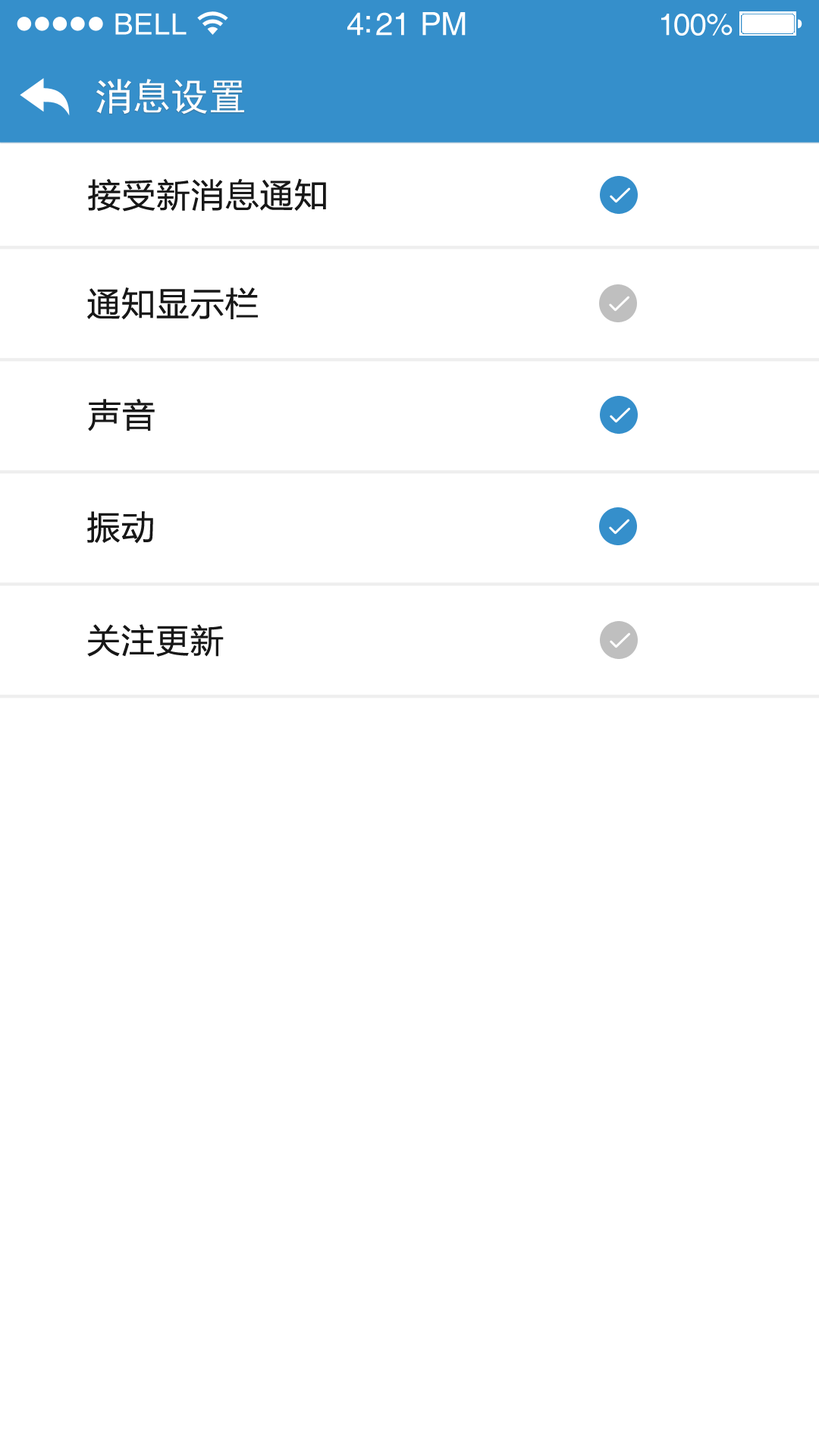
<style>
.page{position:relative;width:819px;height:1456px;background:#ffffff}
.page>*{position:absolute;margin:0}
.t1{font:29.3px "Helvetica";letter-spacing:0.02em;color:#ffffff}
.t2{font:31.8px "Helvetica";letter-spacing:-0.02em;color:#ffffff}
.t3{font:30.6px "Helvetica";letter-spacing:-0.02em;color:#ffffff}
.t4{font:37.9px "SimHei";color:#ffffff}
.t5{font:34.1px "FZLTHJW--GB1-0";letter-spacing:0.01em;color:#171717}
</style>
<div class="page">
<p class="t1" style="left:115px;top:13px;width:72px;height:22px">BELL</p>
<p class="t2" style="left:347px;top:12px;width:119px;height:24px">4:21 PM</p>
<p class="t3" style="left:661px;top:14px;width:72px;height:22px">100%</p>
<p class="t4" style="left:96px;top:79px;width:148px;height:36px">消息设置</p>
<p class="t5" style="left:88px;top:178px;width:238px;height:34px">接受新消息通知</p>
<p class="t5" style="left:87px;top:287px;width:171px;height:33px">通知显示栏</p>
<p class="t5" style="left:88px;top:399px;width:67px;height:32px">声音</p>
<p class="t5" style="left:87px;top:511px;width:66px;height:33px">振动</p>
<p class="t5" style="left:87px;top:624px;width:137px;height:33px">关注更新</p>
</div>
